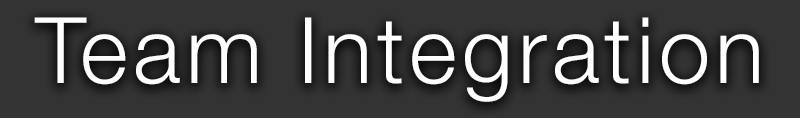
<style>
.page{position:relative;width:800px;height:118px;background:#333333}
.page>*{position:absolute;margin:0}
.t1{font:91.7px "HelveticaNeue-Light";letter-spacing:0.055em;color:#ffffff}
</style>
<div class="page">
<p class="t1" style="left:34px;top:17px;width:725px;height:85px">Team Integration</p>
</div>
